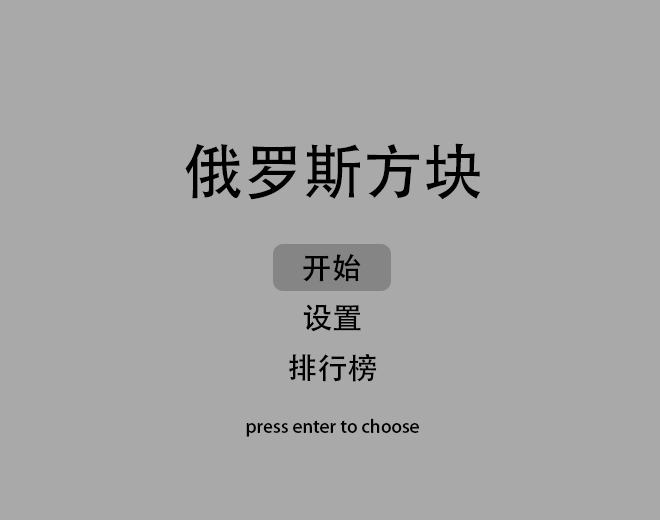
<style>
.page{position:relative;width:660px;height:520px;background:#a9a9a9}
.page>*{position:absolute;margin:0}
.t1{font:60px "AdobeHeitiStd-Regular";color:#000000}
.t2{font:30px "AdobeHeitiStd-Regular";color:#000000}
.t3{font:18px "AdobeHeitiStd-Regular";color:#000000}
</style>
<div class="page">
<p class="t1" style="left:185px;top:143px;width:296px;height:57px">俄罗斯方块</p>
<p class="t2" style="left:303px;top:253px;width:58px;height:29px">开始</p>
<p class="t2" style="left:303px;top:304px;width:58px;height:28px">设置</p>
<p class="t2" style="left:289px;top:353px;width:88px;height:29px">排行榜</p>
<p class="t3" style="left:246px;top:418px;width:173px;height:19px">press enter to choose</p>
</div>
